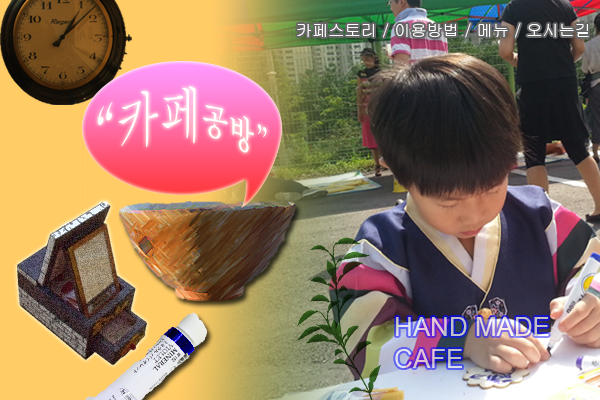
<style>
.page{position:relative;width:600px;height:400px}
.page>*{position:absolute;margin:0}
.t1{font:15.9px "Gulim";color:#ffffff}
.t2{font:63.2px "Batang";color:#ffffff;scale:0.68 1}
.t3{font:39.5px "Batang";color:#ffffff;scale:0.68 1}
.t4{font:26px "ArialMT"}
</style>
<div class="page">
<p class="t1" style="left:297px;top:23px;width:292px;height:15px">카페스토리 / 이용방법 / 메뉴 / 오시는길</p>
<p class="t2" style="left:98px;top:86px;width:169px;height:67px">“카페<span class="t3">공방”</span></p>
<p class="t4" style="left:395px;top:317px;width:154px;height:51px">HAND MADE<br>CAFE</p>
</div>
